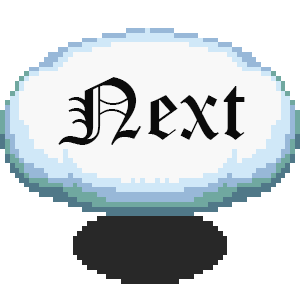
<style>
.page{position:relative;width:300px;height:300px;background:#ffffff}
.page>*{position:absolute;margin:0}
.t1{font:85px "OldEnglishTextMT";color:#0b0b0b}
</style>
<div class="page">
<p class="t1" style="left:58px;top:77px;width:187px;height:68px">Next</p>
</div>
